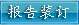
<style>
.page{position:relative;width:79px;height:25px}
.page>*{position:absolute;margin:0}
.t1{font:15px "KaiTi_GB2312";color:#ebf1f1}
</style>
<div class="page">
<p class="t1" style="left:8px;top:5px;width:61px;height:14px">报告装订</p>
</div>
